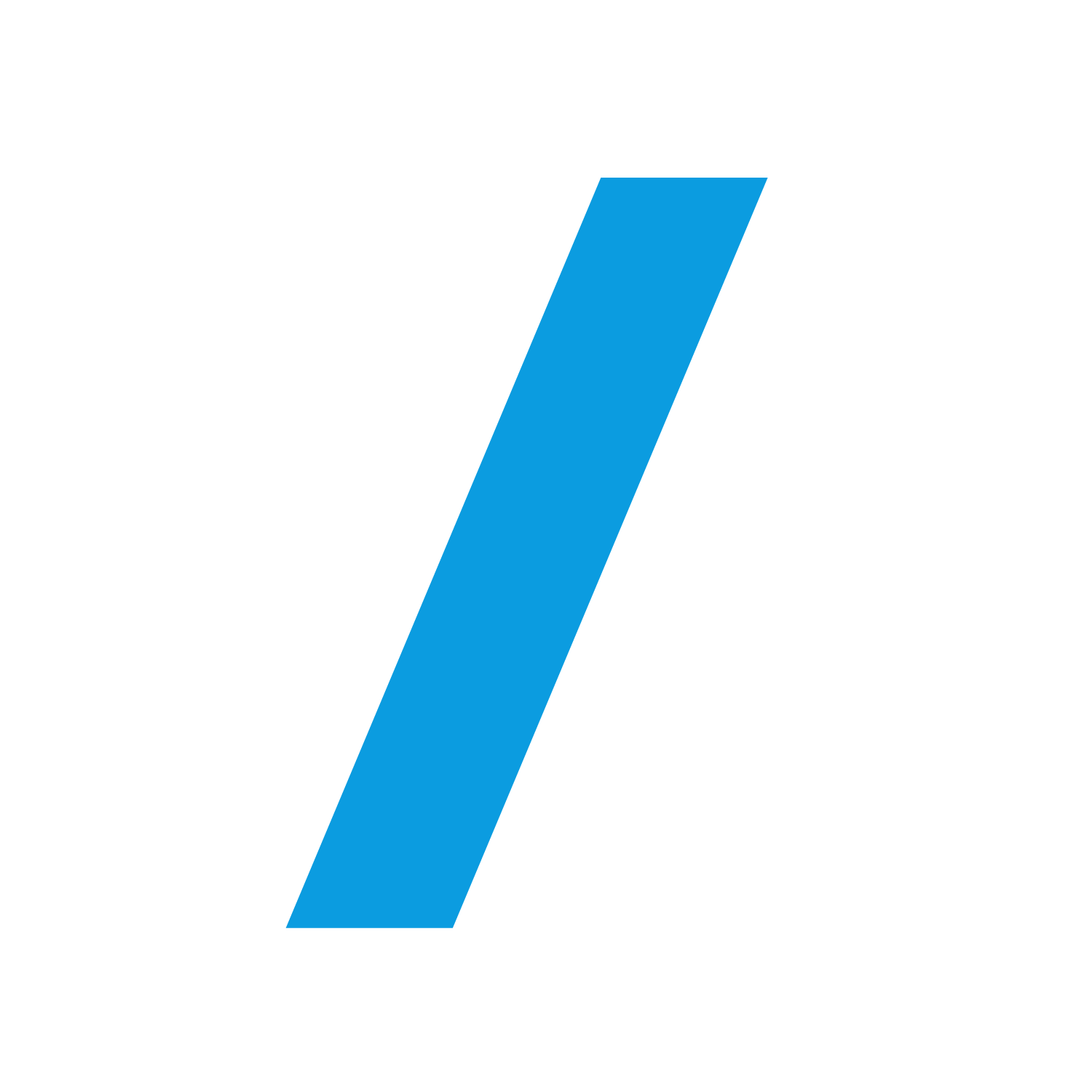
<style>
.page{position:relative;width:1092px;height:1092px;background:#ffffff}
.page>*{position:absolute;margin:0}
.t1{font:919.1px "SegoeProBlack";letter-spacing:-0.025em;color:#0b9ce0}
</style>
<div class="page">
<p class="t1" style="left:285px;top:178px;width:483px;height:750px">/</p>
</div>
